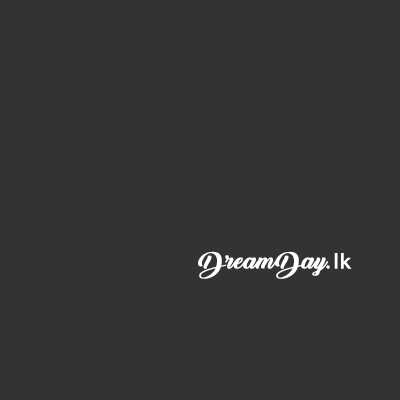
<style>
.page{position:relative;width:400px;height:400px;background:#333333}
.page>*{position:absolute;margin:0}
.t1{font:22px "BacktoBlackDemo";color:#ffffff;font-weight:bold;scale:1.1 1}
.t2{font:22px "MyriadPro-Regular";color:#ffffff;font-weight:bold;scale:1.1 1}
</style>
<div class="page">
<p class="t1" style="left:198px;top:251px;width:154px;height:28px">DreamDay.<span class="t2">lk</span></p>
</div>
